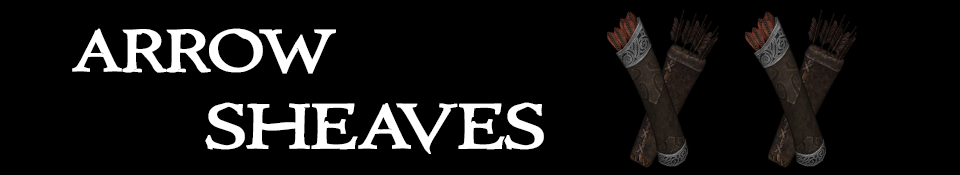
<style>
.page{position:relative;width:960px;height:175px;background:#000000}
.page>*{position:absolute;margin:0}
.t1{font:60px "Immortal";color:#ffffff;text-transform:uppercase;font-weight:bold}
.t2{font:63.7px "Immortal";color:#ffffff;text-transform:uppercase;font-weight:bold}
</style>
<div class="page">
<p class="t1" style="left:72px;top:28px;width:264px;height:46px">Arrow</p>
<p class="t2" style="left:205px;top:102px;width:339px;height:52px">Sheaves</p>
</div>
